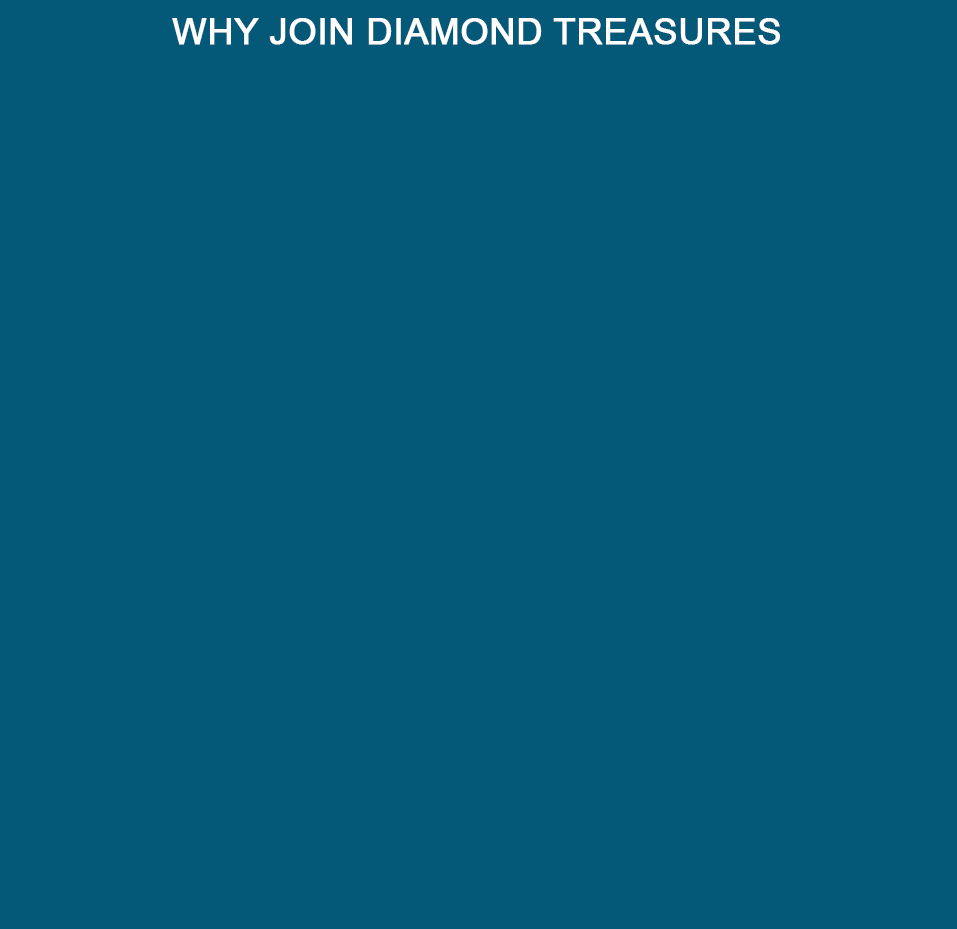
<style>
.page{position:relative;width:957px;height:929px;background:#045978}
.page>*{position:absolute;margin:0}
.t1{font:36px "ArialMT";color:#ffffff;font-weight:bold}
</style>
<div class="page">
<p class="t1" style="left:172px;top:18px;width:608px;height:27px">WHY JOIN DIAMOND TREASURES</p>
</div>
